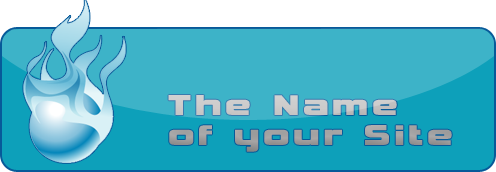
<style>
.page{position:relative;width:496px;height:172px;background:#3db3c8}
.page>*{position:absolute;margin:0}
.t1{font:40px/30px "Vipnagorgialla";letter-spacing:0.1em}
</style>
<div class="page">
<p class="t1" style="left:168px;top:95px;width:284px;height:57px">The Name<br>of your Site</p>
</div>
